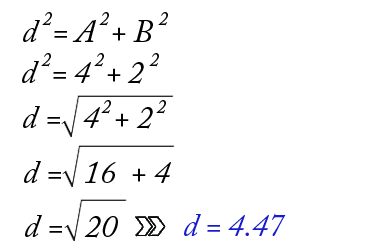
<style>
.page{position:relative;width:388px;height:250px;background:#ffffff}
.page>*{position:absolute;margin:0}
.t1{font:18.7px "ACaslonPro-Italic";color:#010101}
.t2{font:32px "ACaslonPro-Italic";color:#010101}
.t3{font:32px "ACaslonPro-Italic";color:#171bcc}
</style>
<div class="page">
<p class="t1" style="left:42px;top:12px;width:10px;height:14px">2</p>
<p class="t1" style="left:99px;top:12px;width:10px;height:14px">2</p>
<p class="t1" style="left:158px;top:12px;width:10px;height:14px">2</p>
<p class="t2" style="left:23px;top:20px;width:130px;height:22px">d  = A  + B</p>
<p class="t1" style="left:41px;top:53px;width:10px;height:14px">2</p>
<p class="t1" style="left:94px;top:53px;width:10px;height:14px">2</p>
<p class="t1" style="left:149px;top:53px;width:10px;height:14px">2</p>
<p class="t2" style="left:22px;top:61px;width:122px;height:23px">d  = 4  + 2</p>
<p class="t1" style="left:101px;top:100px;width:10px;height:14px">2</p>
<p class="t1" style="left:156px;top:100px;width:10px;height:14px">2</p>
<p class="t2" style="left:23px;top:106px;width:130px;height:23px">d =   4  + 2</p>
<p class="t2" style="left:24px;top:161px;width:147px;height:22px">d =   16  + 4</p>
<p class="t2" style="left:25px;top:215px;width:93px;height:23px">d =   20</p>
<p class="t3" style="left:184px;top:213px;width:102px;height:23px">d = 4.47</p>
</div>
